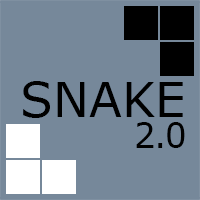
<style>
.page{position:relative;width:200px;height:200px;background:#76889a}
.page>*{position:absolute;margin:0}
.t1{font:48px "Verdana";color:#000000}
.t2{font:34.3px "Verdana";letter-spacing:-0.05em;color:#000000}
</style>
<div class="page">
<p class="t1" style="left:23px;top:81px;width:160px;height:37px">SNAKE</p>
<p class="t2" style="left:136px;top:122px;width:49px;height:26px">2.0</p>
</div>
